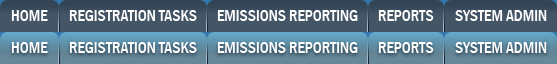
<style>
.page{position:relative;width:557px;height:64px;background:#445566}
.page>*{position:absolute;margin:0}
.t1{font:16px "FranklinGothic-MediumCond";color:#fffefe}
.t2{font:16px "FranklinGothic-MediumCond";color:#ffffff}
</style>
<div class="page">
<p class="t1" style="left:11px;top:10px;width:37px;height:11px">HOME</p>
<p class="t2" style="left:69px;top:10px;width:128px;height:11px">REGISTRATION TASKS</p>
<p class="t2" style="left:217px;top:10px;width:141px;height:11px">EMISSIONS REPORTING</p>
<p class="t2" style="left:378px;top:10px;width:56px;height:11px">REPORTS</p>
<p class="t2" style="left:455px;top:10px;width:92px;height:11px">SYSTEM ADMIN</p>
<p class="t1" style="left:11px;top:42px;width:37px;height:11px">HOME</p>
<p class="t2" style="left:69px;top:42px;width:128px;height:11px">REGISTRATION TASKS</p>
<p class="t2" style="left:217px;top:42px;width:141px;height:11px">EMISSIONS REPORTING</p>
<p class="t2" style="left:378px;top:42px;width:56px;height:11px">REPORTS</p>
<p class="t2" style="left:455px;top:42px;width:92px;height:11px">SYSTEM ADMIN</p>
</div>
